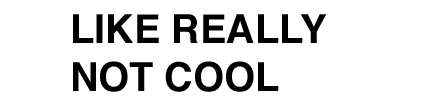
<style>
.page{position:relative;width:425px;height:100px;background:#ffffff}
.page>*{position:absolute;margin:0}
.t1{font:39.7px "Helvetica-Bold";color:#000000}
</style>
<div class="page">
<p class="t1" style="left:73px;top:14px;width:254px;height:78px">LIKE REALLY<br>NOT COOL</p>
</div>
